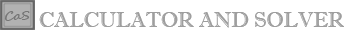
<style>
.page{position:relative;width:354px;height:30px;background:#ffffff}
.page>*{position:absolute;margin:0}
.t1{font:20.8px "ImprintMT-Shadow";color:#9f9f9f}
</style>
<div class="page">
<p class="t1" style="left:39px;top:12px;width:305px;height:16px">CALCULATOR AND SOLVER</p>
</div>
